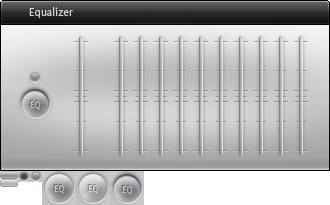
<style>
.page{position:relative;width:330px;height:205px}
.page>*{position:absolute;margin:0}
.t1{font:12px "Delicious-Roman";color:#d4d4d4}
.t2{font:10px "Delicious-Roman";color:#c4c1c4}
</style>
<div class="page">
<p class="t1" style="left:29px;top:7px;width:44px;height:11px">Equalizer</p>
<p class="t2" style="left:30px;top:101px;width:10px;height:9px">EQ</p>
</div>
